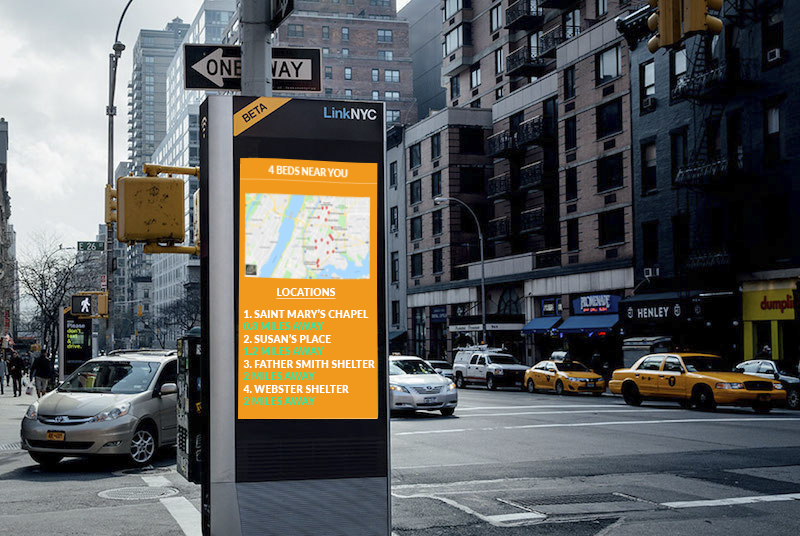
<style>
.page{position:relative;width:800px;height:536px}
.page>*{position:absolute;margin:0}
.t1{font:10.4px "Lato-Black";color:#ffffff;text-transform:uppercase;text-decoration:underline}
.t2{font:10.4px/12.5px "Lato-Black";color:#ffffff;text-transform:uppercase}
.t3{font:10.4px/12.5px "Lato-Black";color:#38e097;text-transform:uppercase}
</style>
<div class="page">
<p class="t1" style="left:276px;top:288px;width:60px;height:11px">Locations</p>
<p class="t2" style="left:243px;top:309px;width:132px;height:96px">1. Saint mary’s chapel<br><span class="t3">0.8 Miles away<br></span>2. Susan’s place<br><span class="t3">1.2 miles away<br></span>3. Father smith shelter<br><span class="t3">2 miles away<br></span>4. wEBSTER sHELTER<br><span class="t3">2 MILES AWAY</span></p>
</div>
